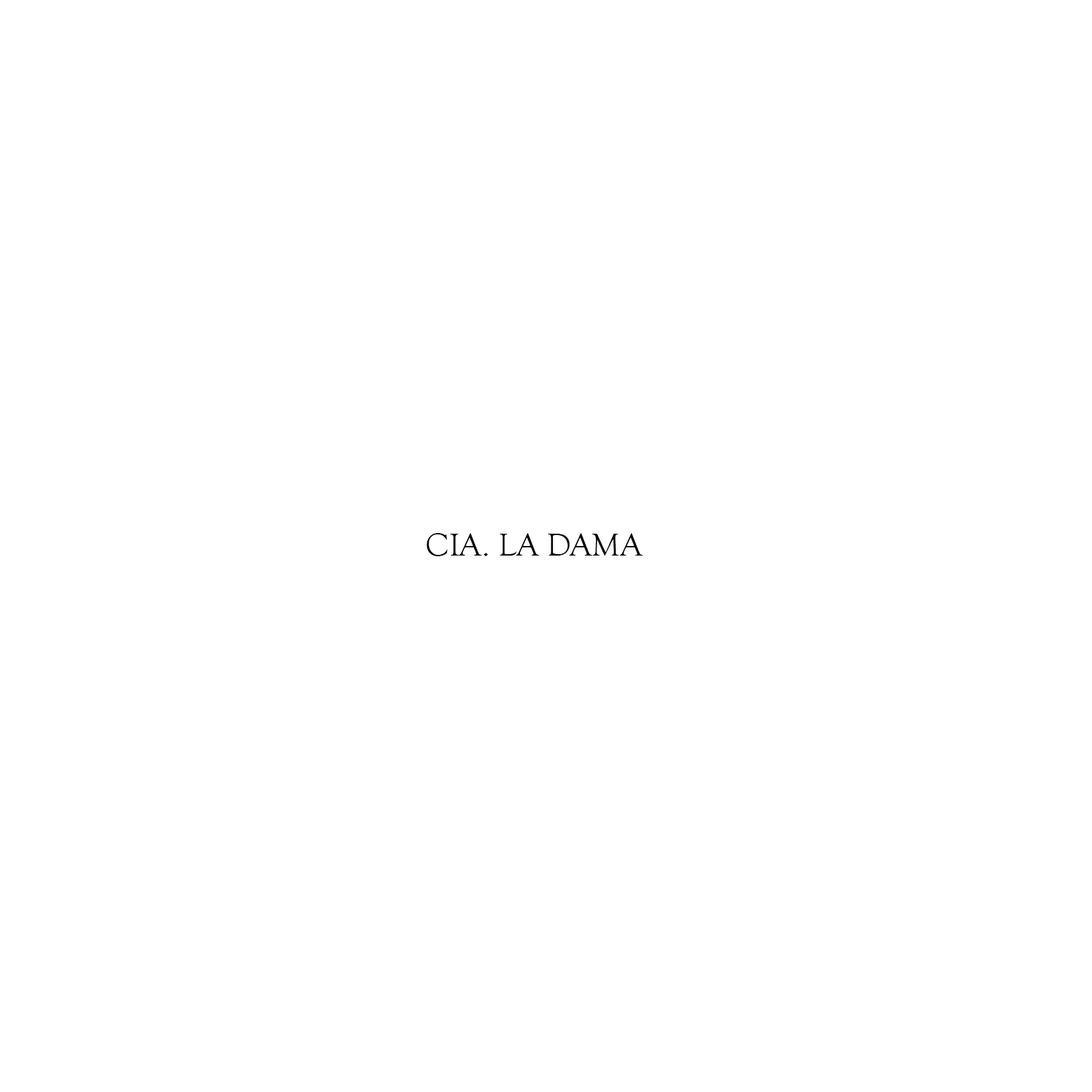
<style>
.page{position:relative;width:1092px;height:1092px;background:#ffffff}
.page>*{position:absolute;margin:0}
.t1{font:33px "GoudyOldStyleT-Regular";color:#000000;text-transform:uppercase}
</style>
<div class="page">
<p class="t1" style="left:427px;top:533px;width:216px;height:23px">Cia. LA DAMA</p>
</div>
